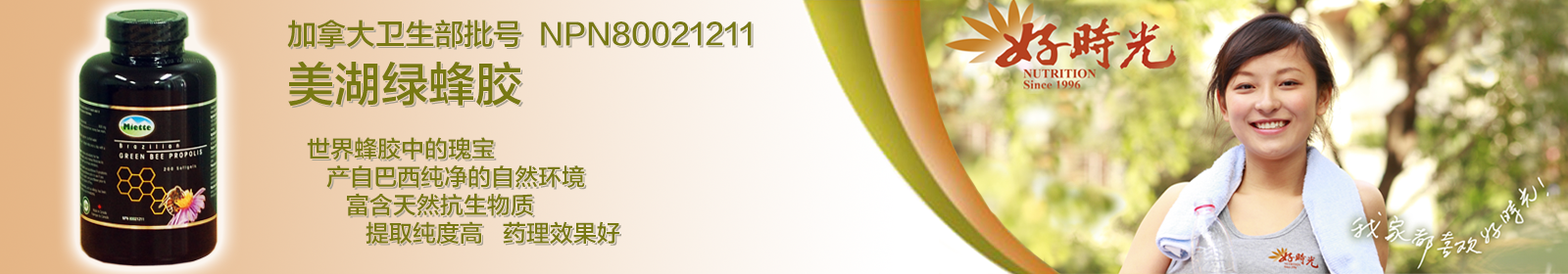
<style>
.page{position:relative;width:1568px;height:274px}
.page>*{position:absolute;margin:0}
.t1{font:23.5px "FZLTZHK--GBK1-0";color:#787913}
.t2{font:29.4px "FZLTZHK--GBK1-0";color:#787913}
.t3{font:47px "FZLTZHK--GBK1-0";color:#787913}
</style>
<div class="page">
<p class="t1" style="left:287px;top:20px;width:465px;height:225px"><span class="t2">加拿大卫生部批号  NPN80021211       <br></span><span class="t3">美湖绿蜂胶<br></span><br>   世界蜂胶中的瑰宝<br>      产自巴西纯净的自然环境<br>         富含天然抗生物质<br>            提取纯度高   药理效果好</p>
</div>
